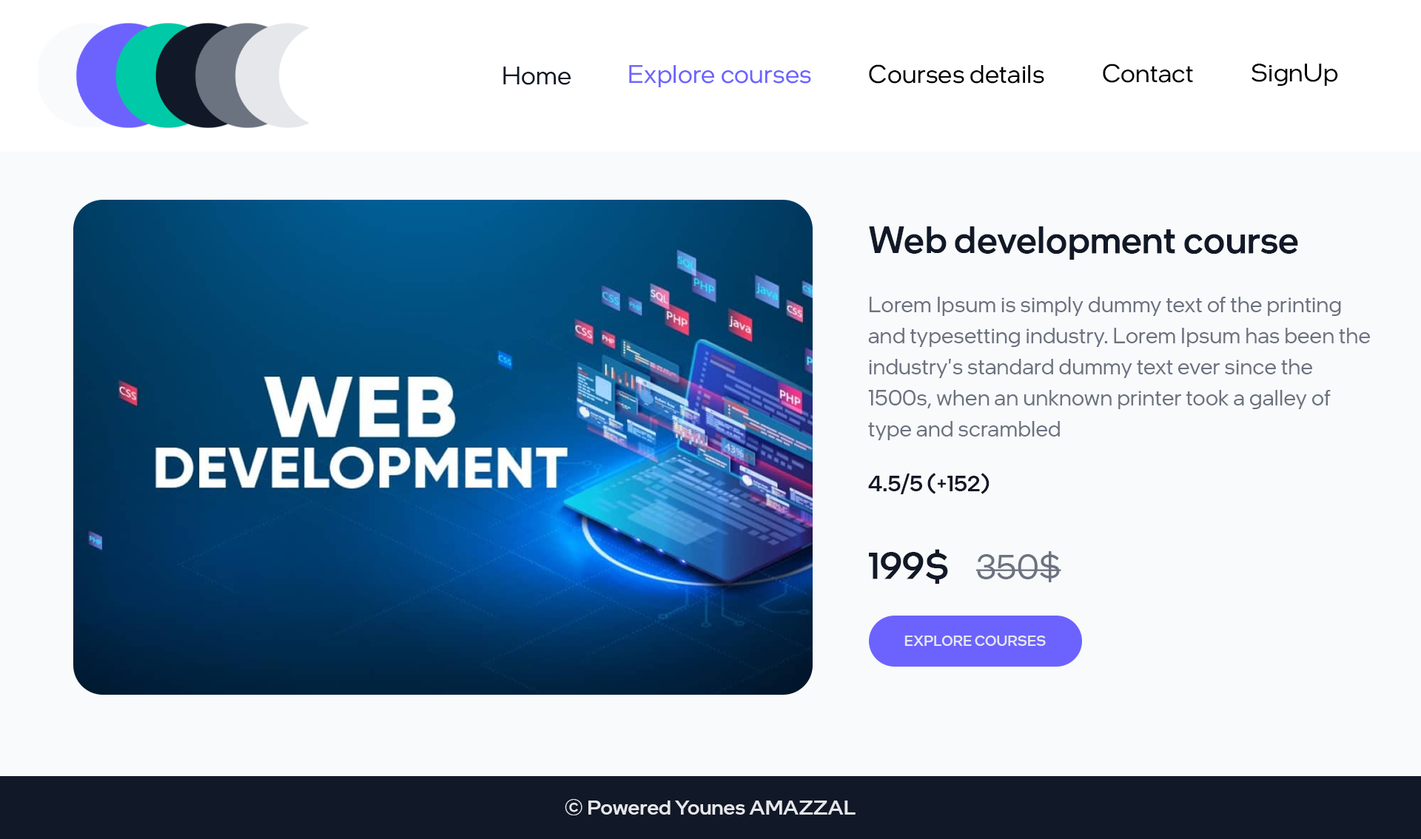
<style>
.page{position:relative;width:1421px;height:839px;background:#f9fafb}
.page>*{position:absolute;margin:0}
.t1{font:25.9px "IntelOneDisplay-Regular";letter-spacing:0.01em;color:#6c63ff}
.t2{font:25.9px "IntelOneDisplay-Regular";letter-spacing:0.01em;color:#000000}
.t3{font:25.9px "IntelOneDisplay-Regular";letter-spacing:0.01em;color:#111827}
.t4{font:37px "IntelOneDisplay-Medium";letter-spacing:0.01em;color:#111827}
.t5{font:22.2px/31.1px "IntelOneDisplay-Regular";letter-spacing:0.01em;color:#6b7280}
.t6{font:22.2px "IntelOneDisplay-Medium";letter-spacing:0.01em;color:#111827}
.t7{font:34.4px "IntelOneDisplay-Regular";letter-spacing:0.01em;color:#6b7280}
.t8{font:14.4px "IntelOneDisplay-Medium";letter-spacing:0.01em;color:#e5e7eb;text-transform:uppercase}
.t9{font:20.7px "IntelOneDisplay-Medium";letter-spacing:0.01em;color:#e5e7eb}
</style>
<div class="page">
<p class="t1" style="left:629px;top:65px;width:182px;height:22px">Explore courses</p>
<p class="t2" style="left:869px;top:64px;width:175px;height:20px">Courses details</p>
<p class="t2" style="left:1103px;top:64px;width:90px;height:19px">Contact</p>
<p class="t2" style="left:1251px;top:64px;width:87px;height:22px">SignUp</p>
<p class="t3" style="left:503px;top:67px;width:68px;height:18px">Home</p>
<p class="t4" style="left:869px;top:226px;width:429px;height:34px">Web development course</p>
<p class="t5" style="left:868px;top:297px;width:502px;height:143px">Lorem Ipsum is simply dummy text of the printing and typesetting industry. Lorem Ipsum has been the industry's standard dummy text ever since the 1500s, when an unknown printer took a galley of type and scrambled</p>
<p class="t6" style="left:868px;top:473px;width:121px;height:21px">4.5/5 (+152)</p>
<p class="t4" style="left:869px;top:549px;width:79px;height:35px">199$</p>
<p class="t7" style="left:975px;top:551px;width:86px;height:31px">350$</p>
<p class="t8" style="left:904px;top:636px;width:142px;height:10px">Explore courses</p>
<p class="t9" style="left:565px;top:799px;width:290px;height:17px">© Powered Younes AMAZZAL</p>
</div>
